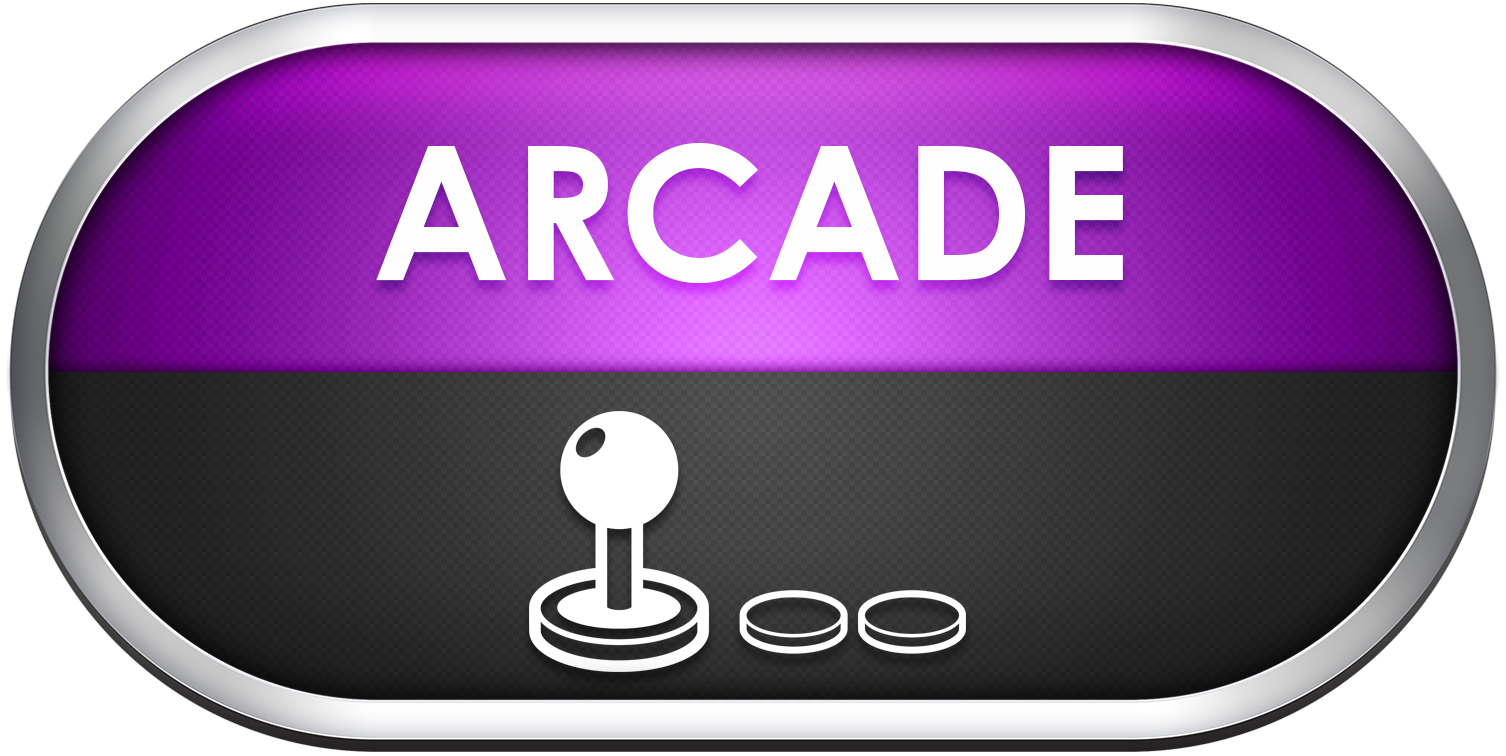
<style>
.page{position:relative;width:1506px;height:756px}
.page>*{position:absolute;margin:0}
.t1{font:186.8px "CenturyGothic-Bold";color:#fefeff}
</style>
<div class="page">
<p class="t1" style="left:376px;top:143px;width:747px;height:140px">ARCADE</p>
</div>
